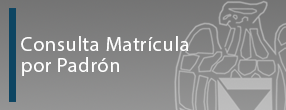
<style>
.page{position:relative;width:286px;height:110px}
.page>*{position:absolute;margin:0}
.t1{font:20.5px/20.9px "MyriadPro-Regular";letter-spacing:0.025em}
.t2{font:20.5px/20.9px "MyriadPro-Regular";letter-spacing:0.025em;color:#ffffff}
</style>
<div class="page">
<p class="t1" style="left:21px;top:36px;width:135px;height:40px">Constancias de <br>Inscripción</p>
<p class="t2" style="left:21px;top:36px;width:168px;height:40px">Consulta Matrícula<br>por Padrón</p>
</div>
